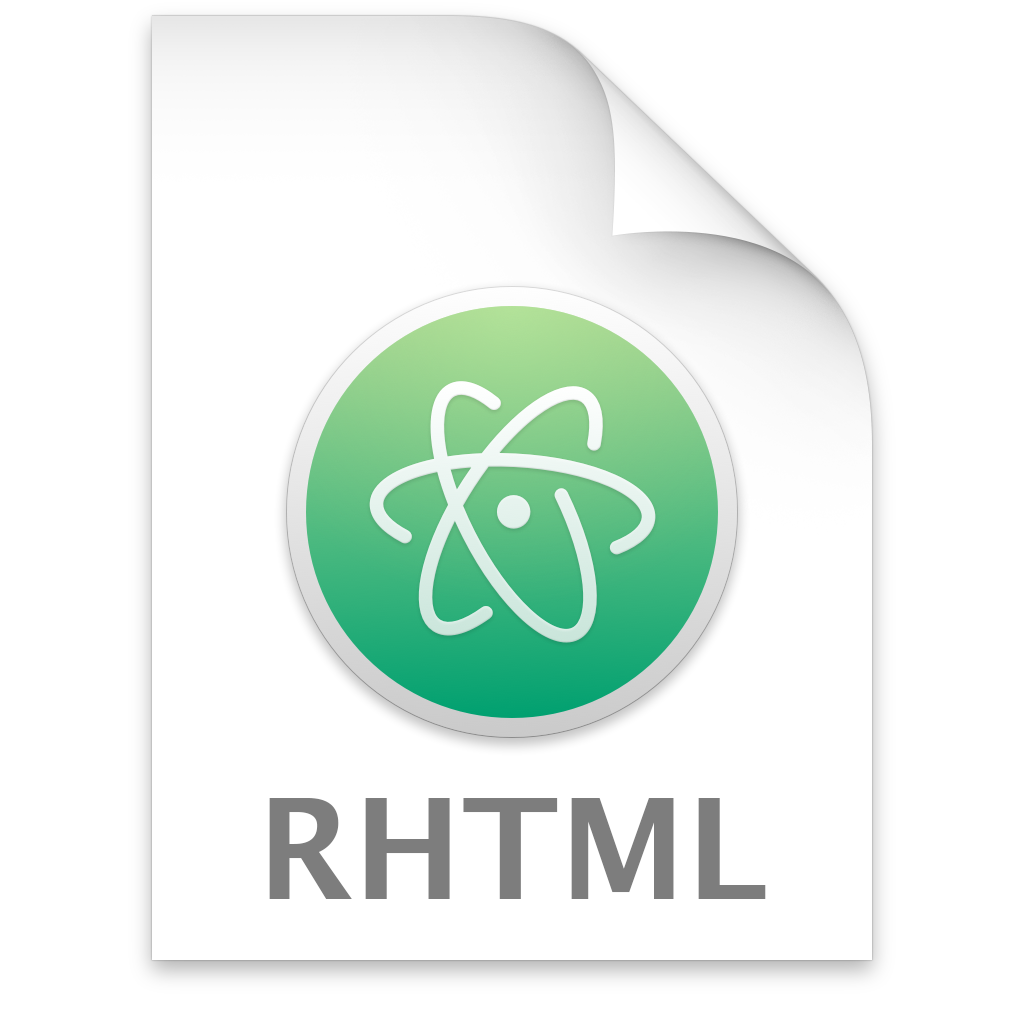
<style>
.page{position:relative;width:1024px;height:1024px;background:#ffffff}
.page>*{position:absolute;margin:0}
.t1{font:140px "LucidaGrande-Bold";color:#7d7d7d}
</style>
<div class="page">
<p class="t1" style="left:269px;top:798px;width:497px;height:101px">RHTML</p>
</div>
